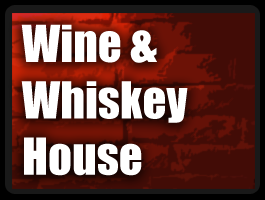
<style>
.page{position:relative;width:265px;height:200px}
.page>*{position:absolute;margin:0}
.t1{font:47px "Impact";color:#ffffff}
</style>
<div class="page">
<p class="t1" style="left:21px;top:24px;width:167px;height:152px">Wine &amp; <br>Whiskey<br>House</p>
</div>
